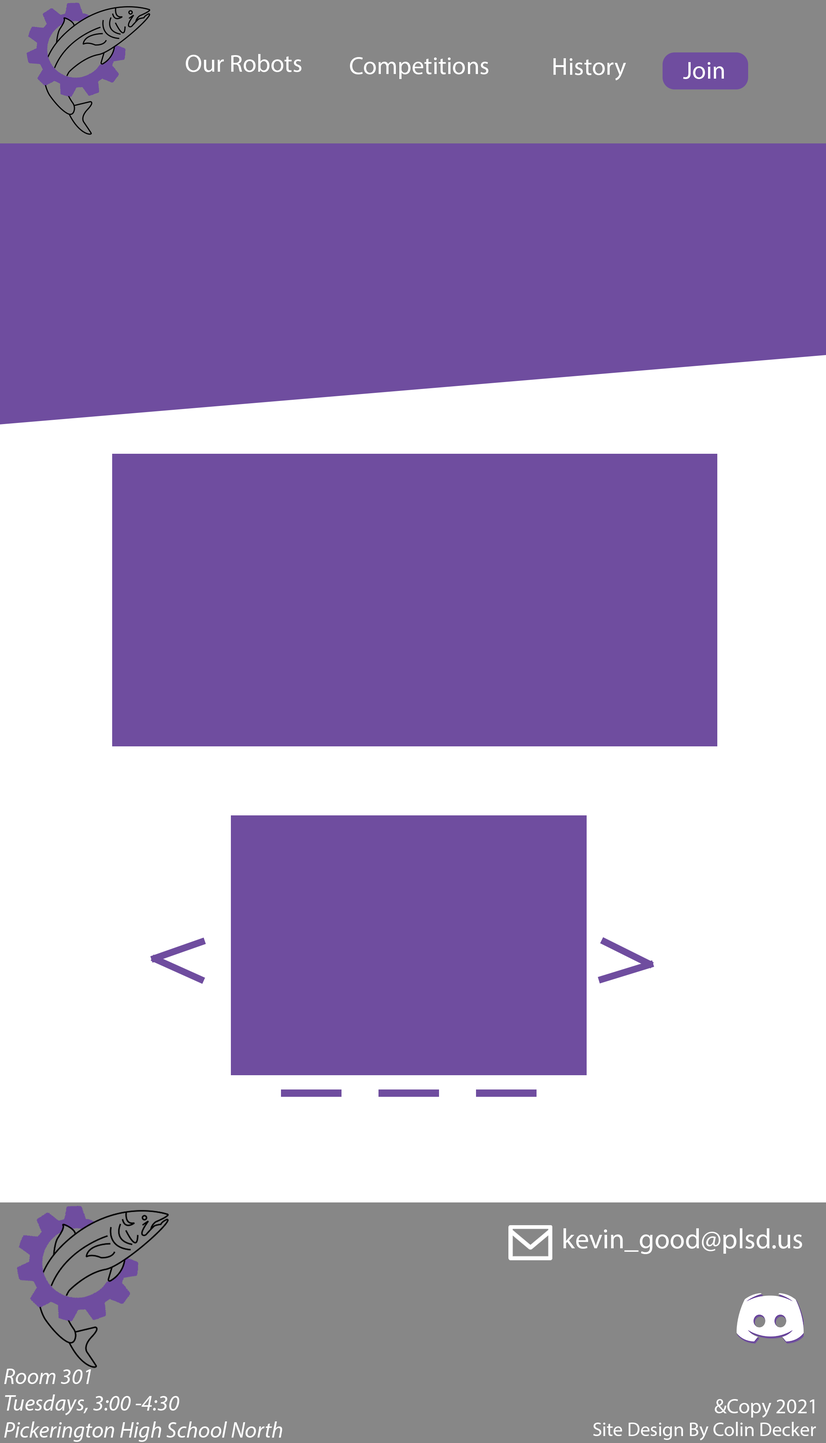
<style>
.page{position:relative;width:826px;height:1443px;background:#6f4d9f}
.page>*{position:absolute;margin:0}
.t1{font:24.9px "MyriadPro-Regular";color:#ffffff}
.t2{font:28.1px "MyriadPro-Regular";color:#ffffff}
.t3{font:22.3px "MyriadPro-It";color:#fefefe}
.t4{font:20.8px "MyriadPro-Regular";color:#fefefe}
.t5{font:19.7px "MyriadPro-Regular";color:#fefefe}
</style>
<div class="page">
<p class="t1" style="left:186px;top:54px;width:116px;height:18px">Our Robots</p>
<p class="t1" style="left:350px;top:57px;width:139px;height:22px">Competitions</p>
<p class="t1" style="left:554px;top:58px;width:72px;height:23px">History</p>
<p class="t1" style="left:683px;top:62px;width:41px;height:17px">Join</p>
<p class="t2" style="left:564px;top:1228px;width:238px;height:26px">kevin_good@plsd.us</p>
<p class="t3" style="left:4px;top:1369px;width:278px;height:73px">Room 301<br>Tuesdays, 3:00 -4:30<br>Pickerington High School North</p>
<p class="t4" style="left:715px;top:1399px;width:100px;height:19px">&amp;Copy 2021</p>
<p class="t5" style="left:593px;top:1422px;width:223px;height:18px">Site Design By Colin Decker</p>
</div>
